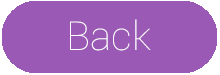
<style>
.page{position:relative;width:220px;height:75px;background:#9b59b6}
.page>*{position:absolute;margin:0}
.t1{font:40px "Roboto-Thin";color:#ffffff}
</style>
<div class="page">
<p class="t1" style="left:70px;top:19px;width:81px;height:32px">Back</p>
</div>
